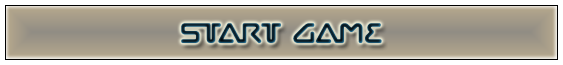
<style>
.page{position:relative;width:563px;height:65px}
.page>*{position:absolute;margin:0}
.t1{font:30px "Chilopod-Regular"}
</style>
<div class="page">
<p class="t1" style="left:181px;top:23px;width:201px;height:20px">Start Game</p>
</div>
